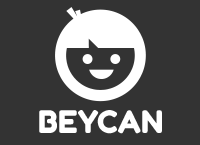
<style>
.page{position:relative;width:200px;height:145px;background:#333333}
.page>*{position:absolute;margin:0}
.t1{font:30.9px "FredokaOne-Regular";color:#ffffff;text-transform:uppercase}
</style>
<div class="page">
<p class="t1" style="left:39px;top:110px;width:123px;height:24px">beycan</p>
</div>
